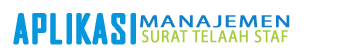
<style>
.page{position:relative;width:350px;height:56px;background:#ffffff}
.page>*{position:absolute;margin:0}
.t1{font:37.9px "AgencyFB-Reg";letter-spacing:0.05em;color:#0696dc;font-weight:bold}
.t2{font:17.6px "MyriadPro-Regular";letter-spacing:0.05em;color:#1180c8;font-weight:bold;scale:1.41 1}
.t3{font:17.6px "MyriadPro-Regular";letter-spacing:0.05em;color:#a4cd37;font-weight:bold;scale:0.86 1}
</style>
<div class="page">
<p class="t1" style="left:14px;top:14px;width:121px;height:30px">APLIKASI</p>
<p class="t2" style="left:140px;top:15px;width:150px;height:13px">MANAJEMEN</p>
<p class="t3" style="left:142px;top:30px;width:146px;height:13px">SURAT TELAAH STAF</p>
</div>
